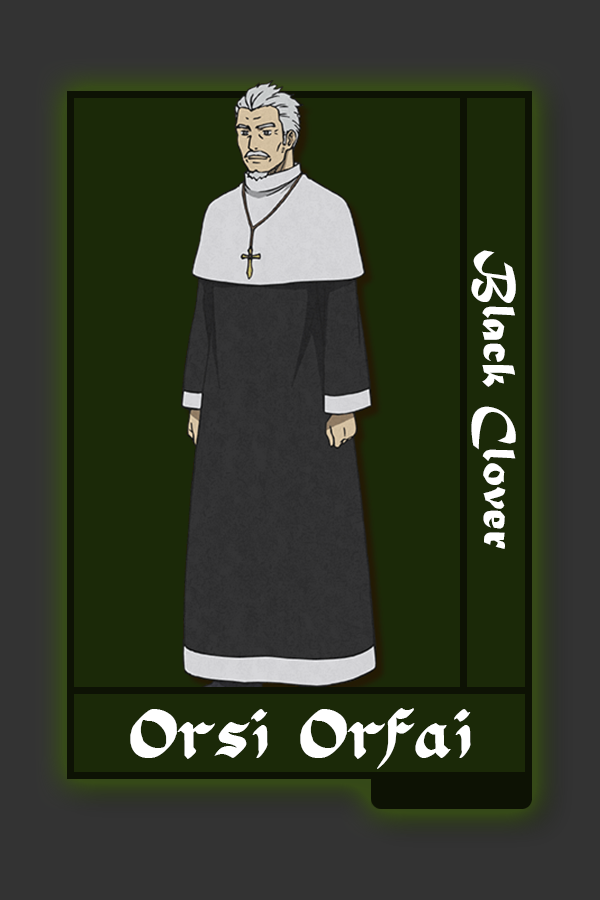
<style>
.page{position:relative;width:600px;height:900px;background:#1b2908}
.page>*{position:absolute;margin:0}
.t1{font:48.8px "MaturaMTScriptCapitals";color:#ffffff}
.t2{font:59.7px "FloranteatLaura";color:#ffffff}
</style>
<div class="page">
<p class="t1" style="left:471px;top:250px;width:45px;height:299px;rotate:90deg">Black Clover</p>
<p class="t2" style="left:130px;top:708px;width:341px;height:61px">Orsi Orfai</p>
</div>
